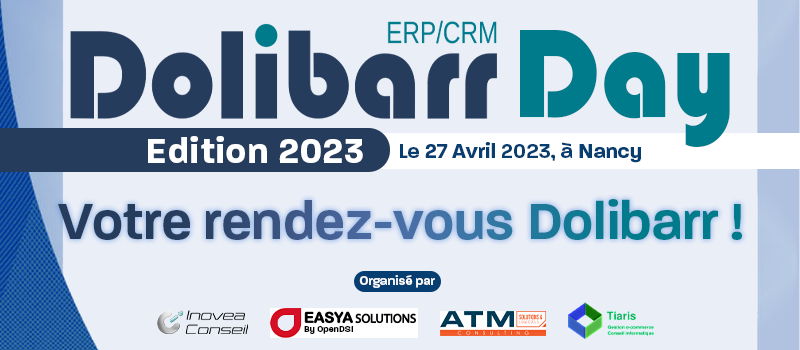
<style>
.page{position:relative;width:800px;height:350px;background:#eaeef7}
.page>*{position:absolute;margin:0}
.t1{font:131.4px "Blippo";color:#007b8c;scale:0.92 1}
.t2{font:36.1px "ParalucentText-Bold";color:#ffffff}
.t3{font:21.2px "Paralucent-Bold";color:#063e71}
.t4{font:21.2px "Paralucent-DemiBold";color:#063e71}
.t5{font:54.2px "Paralucent-DemiBold"}
.t6{font:13.2px "Paralucent-DemiBold";color:#ffffff}
.t7{font:9px "Paralucent-DemiBold";color:#000000}
</style>
<div class="page">
<p class="t1" style="left:520px;top:30px;width:210px;height:117px">Day</p>
<p class="t2" style="left:148px;top:136px;width:215px;height:27px">Edition 2023</p>
<p class="t3" style="left:400px;top:142px;width:241px;height:21px"><span class="t4">Le </span>27 Avril<span class="t4"> 2023, à </span>Nancy</p>
<p class="t5" style="left:58px;top:199px;width:684px;height:41px">Votre rendez-vous Dolibarr !</p>
<p class="t6" style="left:359px;top:275px;width:76px;height:13px">Organisé par</p>
<p class="t7" style="left:304px;top:326px;width:49px;height:8px">By OpenDSI</p>
</div>
